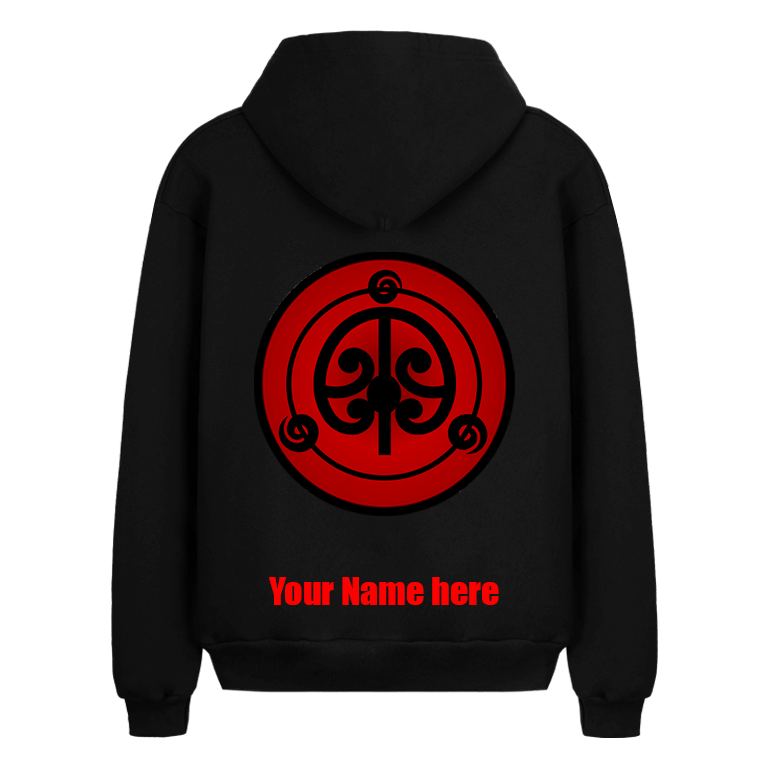
<style>
.page{position:relative;width:770px;height:770px;background:#ffffff}
.page>*{position:absolute;margin:0}
.t1{font:36px "Impact";color:#ff0000}
</style>
<div class="page">
<p class="t1" style="left:269px;top:577px;width:230px;height:28px">Your Name here</p>
</div>
